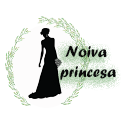
<style>
.page{position:relative;width:124px;height:129px;background:#ffffff}
.page>*{position:absolute;margin:0}
.t1{font:16.1px "ForteMT";color:#0b0a0b}
</style>
<div class="page">
<p class="t1" style="left:60px;top:46px;width:56px;height:34px;text-align:center">Noiva<br> princesa</p>
</div>
